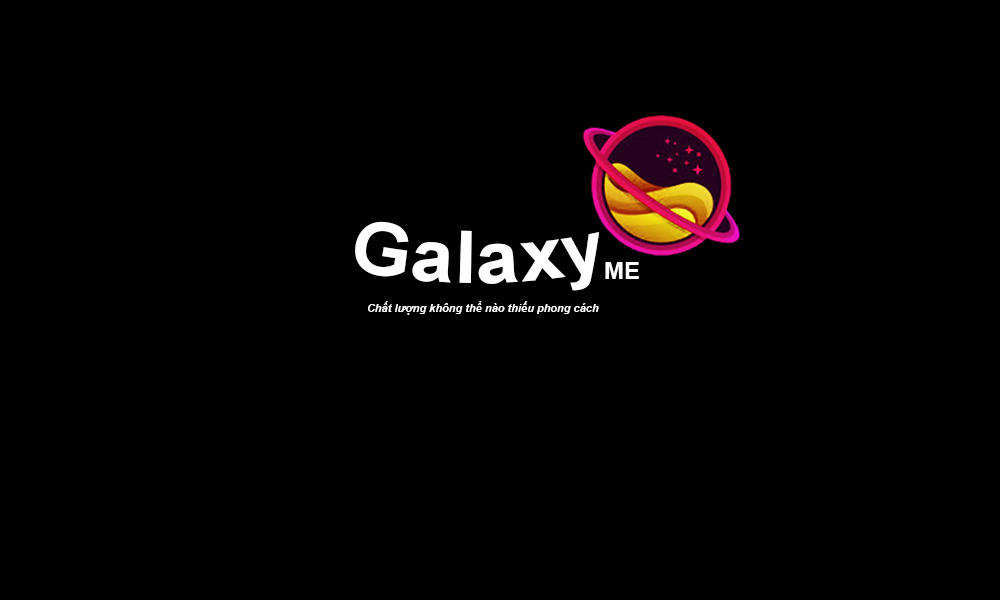
<style>
.page{position:relative;width:1000px;height:600px;background:#000000}
.page>*{position:absolute;margin:0}
.t1{font:72px "Arial-BoldMT";color:#fefefe}
.t2{font:24px "Arial-BoldMT";color:#fefefe}
.t3{font:11px "Arial-BoldItalicMT";color:#ffffff}
</style>
<div class="page">
<p class="t1" style="left:355px;top:221px;width:245px;height:70px">Galaxy</p>
<p class="t2" style="left:605px;top:262px;width:34px;height:17px">ME</p>
<p class="t3" style="left:368px;top:301px;width:231px;height:14px">Chất lượng không thể nào thiếu phong cách</p>
</div>
